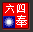
<style>
.page{position:relative;width:33px;height:32px;background:#f20000}
.page>*{position:absolute;margin:0}
.t1{font:10.4px "SimSun";color:#ffffff}
.t2{font:11.7px "SimSun";color:#ffffff}
</style>
<div class="page">
<p class="t1" style="left:5px;top:4px;width:20px;height:9px">六四</p>
<p class="t2" style="left:16px;top:15px;width:11px;height:12px">奉</p>
</div>
